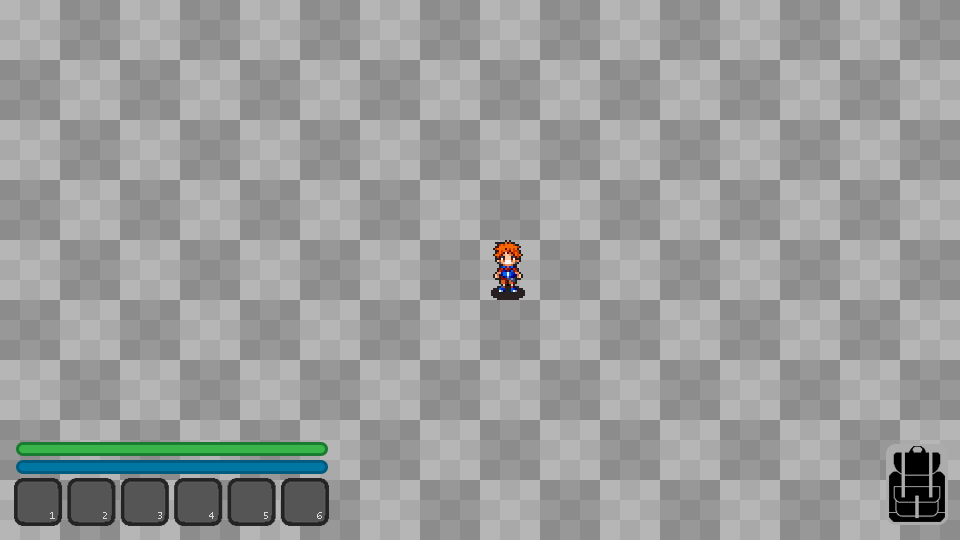
<style>
.page{position:relative;width:960px;height:540px;background:#b6b6b6}
.page>*{position:absolute;margin:0}
.t1{font:10.7px "LucidaConsole";color:#d7d7d7}
</style>
<div class="page">
<p class="t1" style="left:50px;top:512px;width:5px;height:7px">1</p>
<p class="t1" style="left:103px;top:512px;width:4px;height:7px">2</p>
<p class="t1" style="left:158px;top:512px;width:4px;height:7px">3</p>
<p class="t1" style="left:209px;top:512px;width:5px;height:7px">4</p>
<p class="t1" style="left:264px;top:512px;width:4px;height:7px">5</p>
<p class="t1" style="left:317px;top:512px;width:5px;height:7px">6</p>
</div>
